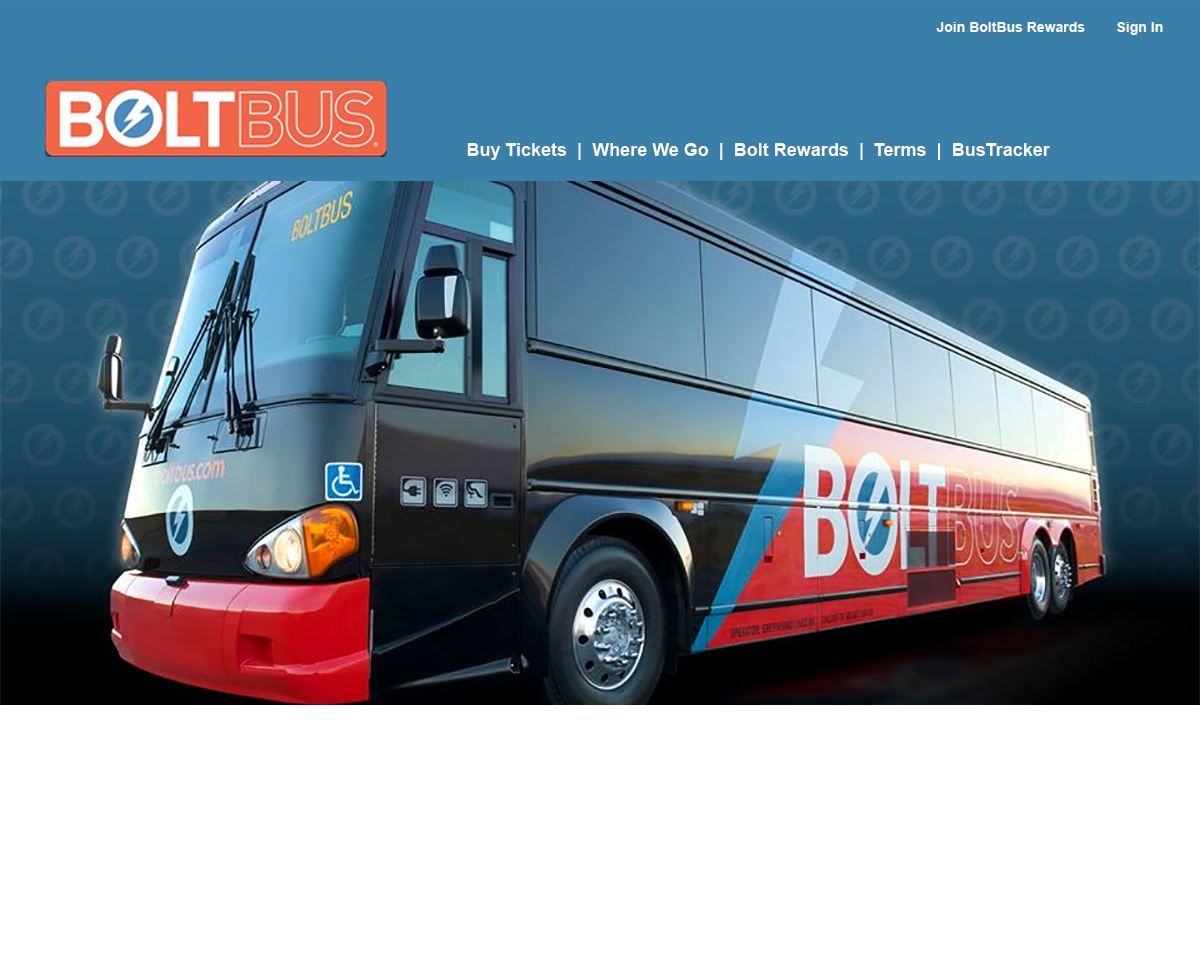
<style>
.page{position:relative;width:1200px;height:960px;background:#ffffff}
.page>*{position:absolute;margin:0}
.t1{font:14px "Arial-BoldMT";color:#ffffff}
.t2{font:14px "Arial-BoldMT";color:#020001}
.t3{font:18px "Arial-BoldMT";color:#ffffff}
</style>
<div class="page">
<p class="t1" style="left:936px;top:22px;width:227px;height:13px"><span class="t2"><br></span>Join BoltBus Rewards Sign In</p>
<p class="t3" style="left:467px;top:143px;width:583px;height:17px">Buy Tickets  |  Where We Go  |  Bolt Rewards  |  Terms  |  BusTracker</p>
</div>
